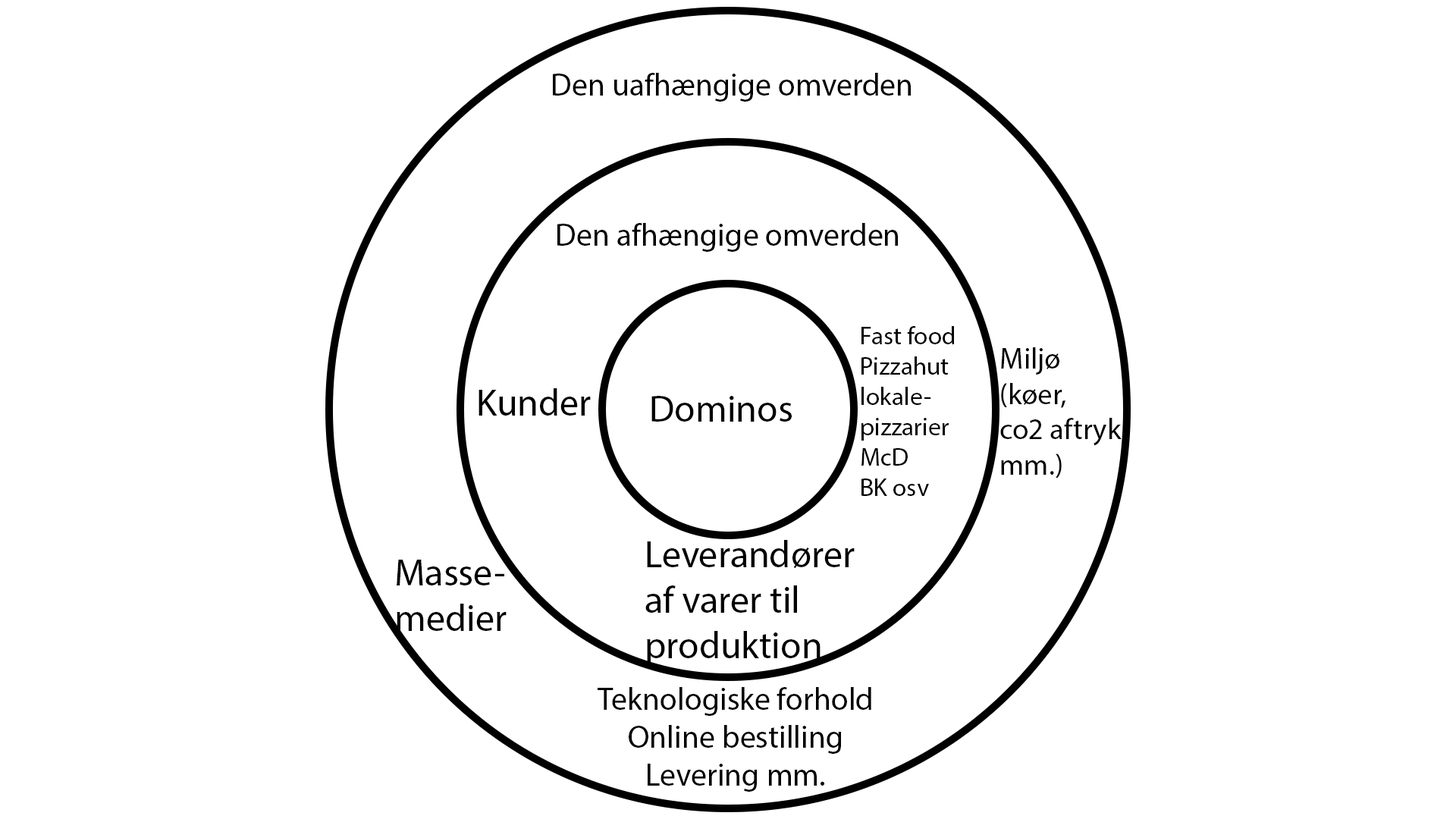
<style>
.page{position:relative;width:1456px;height:819px;background:#ffffff}
.page>*{position:absolute;margin:0}
.t1{font:31.6px "MyriadPro-Regular";color:#000000}
.t2{font:25.3px "MyriadPro-Regular";color:#000000}
.t3{font:29.4px "MyriadPro-Regular";color:#000000}
.t4{font:37.9px "MyriadPro-Regular";color:#000000}
</style>
<div class="page">
<p class="t1" style="left:553px;top:73px;width:358px;height:29px">Den uafhængige omverden</p>
<p class="t1" style="left:557px;top:223px;width:341px;height:29px">Den afhængige omverden</p>
<p class="t2" style="left:861px;top:326px;width:93px;height:170px">Fast food<br>Pizzahut<br>lokale- <br>pizzarier<br>McD<br>BK osv</p>
<p class="t3" style="left:1000px;top:347px;width:122px;height:131px">Miljø<br>(køer,<br>co2 aftryk<br>mm.)</p>
<p class="t4" style="left:479px;top:388px;width:112px;height:28px">Kunder</p>
<p class="t4" style="left:651px;top:396px;width:141px;height:26px">Dominos</p>
<p class="t4" style="left:645px;top:540px;width:210px;height:126px">Leverandører<br>af varer til <br>produktion</p>
<p class="t4" style="left:397px;top:560px;width:110px;height:71px">Masse-<br>medier</p>
<p class="t1" style="left:598px;top:687px;width:273px;height:105px;text-align:center">Teknologiske forhold<br>Online bestilling<br>Levering mm.</p>
</div>
